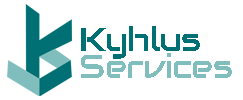
<style>
.page{position:relative;width:243px;height:100px;background:#ffffff}
.page>*{position:absolute;margin:0}
.t1{font:33.3px "Audiowide-Regular";letter-spacing:-0.02em;color:#007074}
.t2{font:33.3px "Audiowide-Regular";letter-spacing:-0.02em;color:#7fbebd}
</style>
<div class="page">
<p class="t1" style="left:81px;top:26px;width:119px;height:33px">Kyhlus</p>
<p class="t2" style="left:81px;top:53px;width:151px;height:25px">Services</p>
</div>
